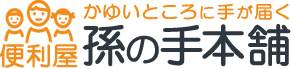
<style>
.page{position:relative;width:291px;height:69px;background:#ffffff}
.page>*{position:absolute;margin:0}
.t1{font:17.5px "HGMaruGothicMPRO";color:#f28d1b;font-weight:bold;scale:1.06 1}
.t2{font:15px "HGMaruGothicMPRO";color:#f28d1b;font-weight:bold;scale:1.06 1}
.t3{font:45px "HGMaruGothicMPRO";color:#2e3740;font-weight:bold}
.t4{font:35px "HGMaruGothicMPRO";color:#2e3740;font-weight:bold}
.t5{font:26px "HGMaruGothicMPRO";color:#f28d1b;font-weight:bold}
</style>
<div class="page">
<p class="t1" style="left:83px;top:3px;width:206px;height:17px">かゆいところ<span class="t2">に</span>手<span class="t2">が</span>届く</p>
<p class="t3" style="left:82px;top:24px;width:209px;height:43px">孫<span class="t4">の</span>手本舗</p>
<p class="t5" style="left:0px;top:43px;width:78px;height:25px">便利屋</p>
</div>
